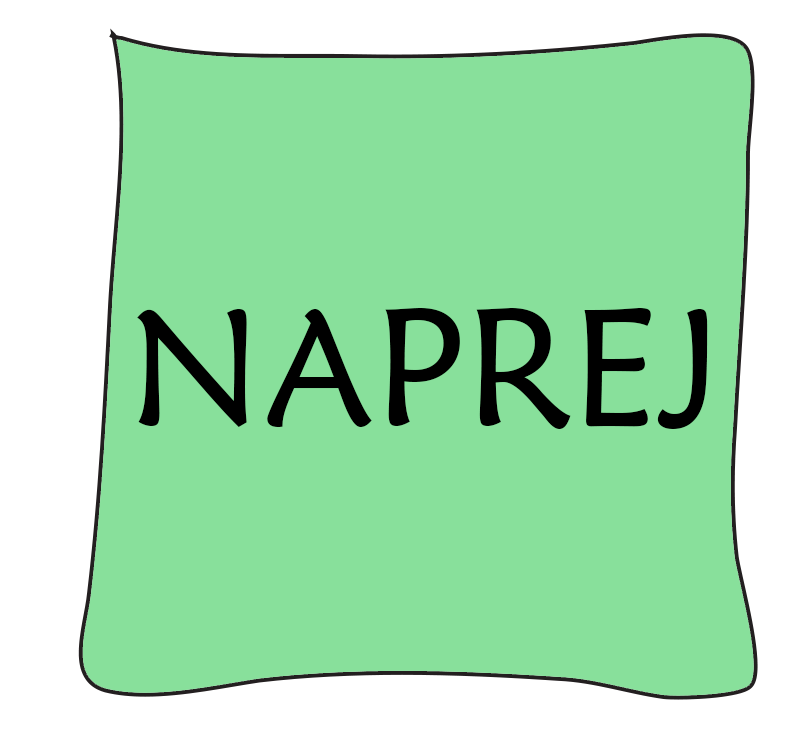
<style>
.page{position:relative;width:810px;height:749px;background:#88e09b}
.page>*{position:absolute;margin:0}
.t1{font:166.7px "MaiandraGD-Regular";color:#000000}
</style>
<div class="page">
<p class="t1" style="left:137px;top:308px;width:571px;height:121px">NAPREJ</p>
</div>
